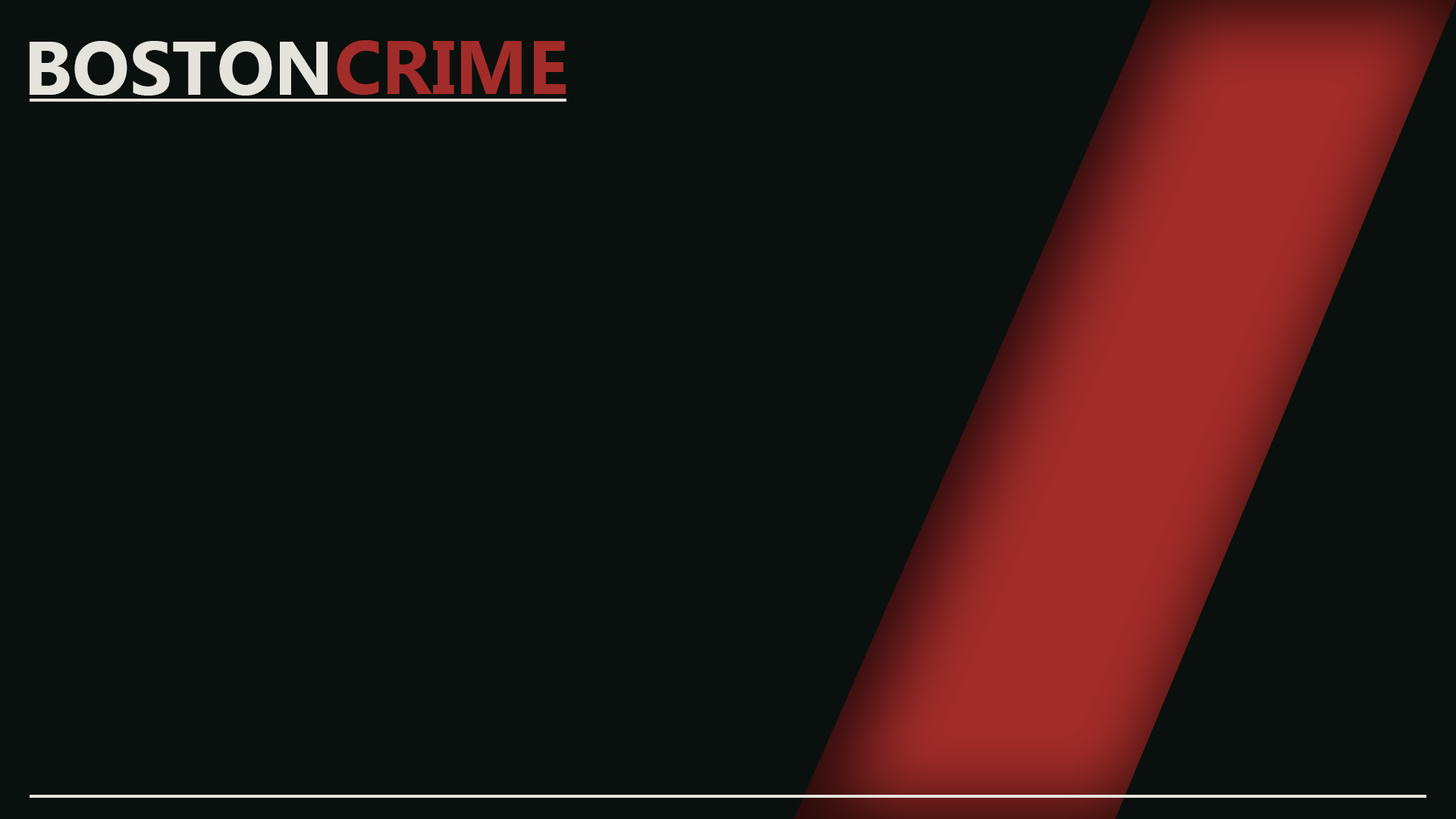
<style>
.page{position:relative;width:1456px;height:819px;background:#0a100d}
.page>*{position:absolute;margin:0}
.t1{font:75.8px "MicrosoftTaiLe-Bold";color:#e5e4dc}
.t2{font:75.8px "MicrosoftTaiLe-Bold";color:#a22c29}
</style>
<div class="page">
<p class="t1" style="left:30px;top:41px;width:298px;height:55px">BOSTON</p>
<p class="t2" style="left:337px;top:40px;width:229px;height:55px">CRIME</p>
</div>
